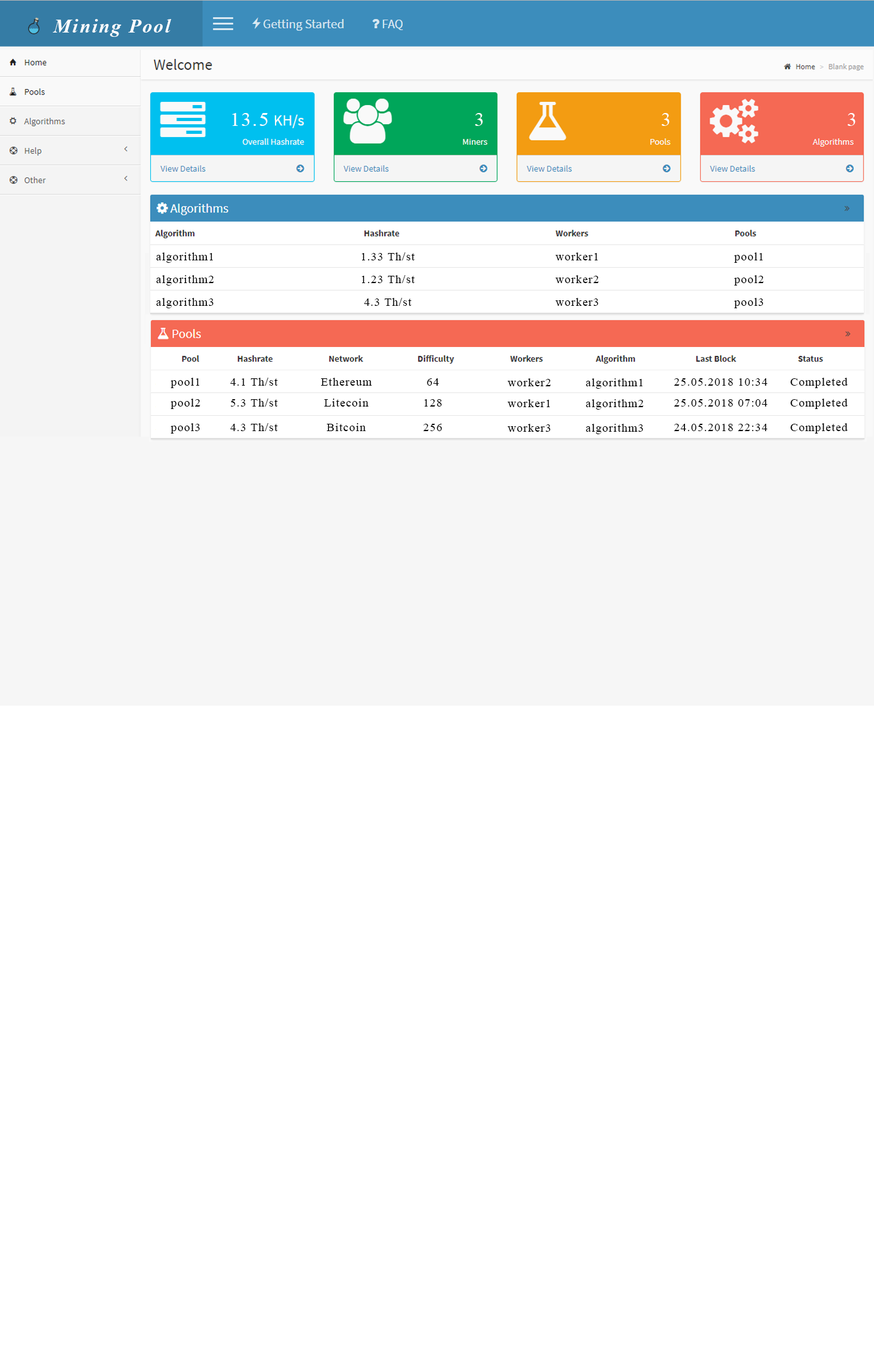
<style>
.page{position:relative;width:874px;height:1364px;background:#ffffff}
.page>*{position:absolute;margin:0}
.t1{font:19.6px "TimesNewRomanPS-BoldItalicMT";letter-spacing:0.075em;color:#feffff}
.t2{font:19.6px "TimesNewRomanPSMT";letter-spacing:0.075em;color:#ffffff}
.t3{font:19.6px "TimesNewRomanPSMT";letter-spacing:0.075em;color:#feffff}
.t4{font:11.5px "TimesNewRomanPSMT";letter-spacing:0.075em;color:#000000}
</style>
<div class="page">
<p class="t1" style="left:53px;top:19px;width:118px;height:18px">Mining Pool</p>
<p class="t2" style="left:232px;top:113px;width:36px;height:13px">13.5</p>
<p class="t2" style="left:475px;top:113px;width:8px;height:13px">3</p>
<p class="t3" style="left:662px;top:113px;width:8px;height:13px">3</p>
<p class="t3" style="left:848px;top:113px;width:8px;height:13px">3</p>
<p class="t4" style="left:156px;top:252px;width:57px;height:11px">algorithm1</p>
<p class="t4" style="left:362px;top:252px;width:53px;height:8px">1.33 Th/st</p>
<p class="t4" style="left:556px;top:252px;width:42px;height:8px">worker1</p>
<p class="t4" style="left:734px;top:252px;width:29px;height:11px">pool1</p>
<p class="t4" style="left:156px;top:275px;width:58px;height:11px">algorithm2</p>
<p class="t4" style="left:362px;top:275px;width:53px;height:8px">1.23 Th/st</p>
<p class="t4" style="left:556px;top:275px;width:43px;height:8px">worker2</p>
<p class="t4" style="left:734px;top:275px;width:30px;height:11px">pool2</p>
<p class="t4" style="left:156px;top:298px;width:58px;height:10px">algorithm3</p>
<p class="t4" style="left:364px;top:298px;width:48px;height:8px">4.3 Th/st</p>
<p class="t4" style="left:556px;top:298px;width:43px;height:8px">worker3</p>
<p class="t4" style="left:734px;top:298px;width:30px;height:10px">pool3</p>
<p class="t4" style="left:171px;top:378px;width:29px;height:10px">pool1</p>
<p class="t4" style="left:230px;top:378px;width:48px;height:8px">4.1 Th/st</p>
<p class="t4" style="left:321px;top:378px;width:51px;height:8px">Ethereum</p>
<p class="t4" style="left:791px;top:378px;width:57px;height:10px">Completed</p>
<p class="t4" style="left:427px;top:378px;width:12px;height:8px">64</p>
<p class="t4" style="left:508px;top:378px;width:43px;height:8px">worker2</p>
<p class="t4" style="left:586px;top:378px;width:57px;height:11px">algorithm1</p>
<p class="t4" style="left:674px;top:378px;width:94px;height:8px">25.05.2018 10:34</p>
<p class="t4" style="left:171px;top:399px;width:29px;height:10px">pool2</p>
<p class="t4" style="left:231px;top:399px;width:47px;height:7px">5.3 Th/st</p>
<p class="t4" style="left:324px;top:399px;width:45px;height:7px">Litecoin</p>
<p class="t4" style="left:424px;top:399px;width:18px;height:7px">128</p>
<p class="t4" style="left:508px;top:399px;width:42px;height:8px">worker1</p>
<p class="t4" style="left:586px;top:399px;width:58px;height:11px">algorithm2</p>
<p class="t4" style="left:674px;top:399px;width:94px;height:7px">25.05.2018 07:04</p>
<p class="t4" style="left:791px;top:399px;width:57px;height:10px">Completed</p>
<p class="t4" style="left:171px;top:423px;width:29px;height:11px">pool3</p>
<p class="t4" style="left:230px;top:423px;width:48px;height:8px">4.3 Th/st</p>
<p class="t4" style="left:327px;top:423px;width:39px;height:8px">Bitcoin</p>
<p class="t4" style="left:423px;top:424px;width:19px;height:7px">256</p>
<p class="t4" style="left:508px;top:424px;width:43px;height:8px">worker3</p>
<p class="t4" style="left:586px;top:424px;width:58px;height:10px">algorithm3</p>
<p class="t4" style="left:674px;top:424px;width:94px;height:7px">24.05.2018 22:34</p>
<p class="t4" style="left:791px;top:423px;width:57px;height:11px">Completed</p>
</div>
